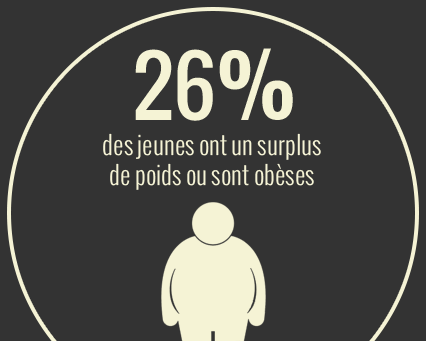
<style>
.page{position:relative;width:426px;height:341px;background:#333333}
.page>*{position:absolute;margin:0}
.t1{font:79.7px "Oswald";color:#f5f3d5}
.t2{font:79.7px "Oswald-Bold";color:#f5f3d5}
.t3{font:25px/30px "Oswald-Light";color:#f5f3d5}
</style>
<div class="page">
<p class="t1" style="left:135px;top:48px;width:158px;height:73px">26<span class="t2">%</span></p>
<p class="t3" style="left:103px;top:133px;width:218px;height:57px;text-align:center">des jeunes ont un surplus<br>de poids ou sont obèses</p>
</div>
